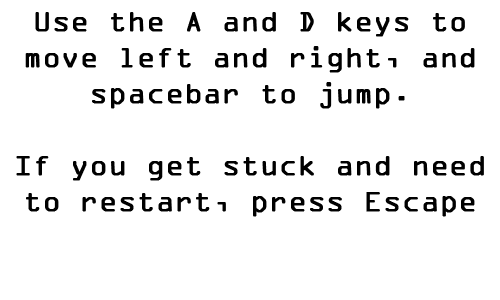
<style>
.page{position:relative;width:500px;height:300px;background:#ffffff}
.page>*{position:absolute;margin:0}
.t1{font:30px "OCRAExtended";color:#000000;font-weight:bold}
</style>
<div class="page">
<p class="t1" style="left:16px;top:12px;width:468px;height:205px;text-align:center">Use the A and D keys to move left and right, and spacebar to jump.<br><br>If you get stuck and need to restart, press Escape</p>
</div>
